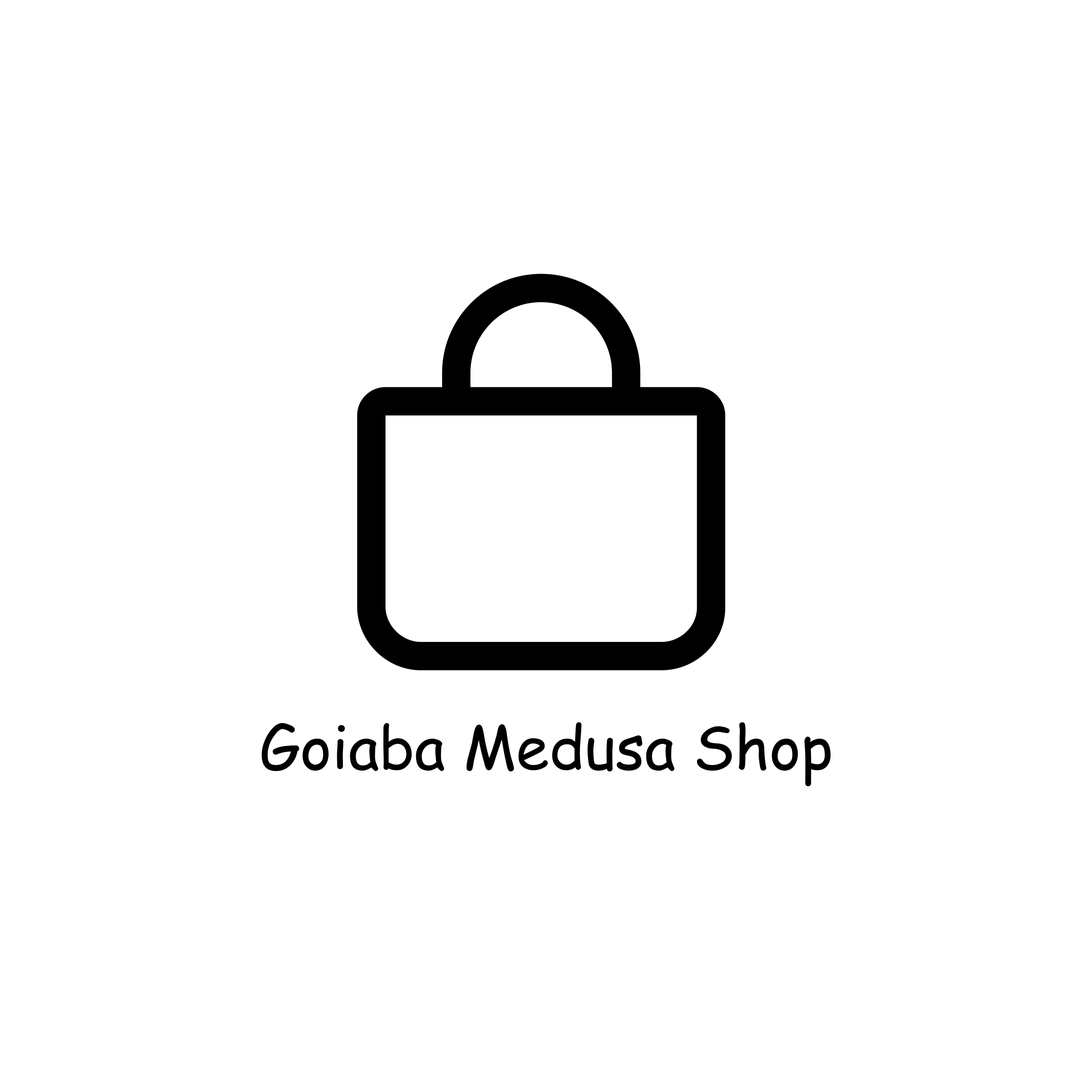
<style>
.page{position:relative;width:1092px;height:1092px;background:#ffffff}
.page>*{position:absolute;margin:0}
.t1{font:60px "ComicSansMS";color:#000000}
</style>
<div class="page">
<p class="t1" style="left:261px;top:722px;width:570px;height:64px">Goiaba Medusa Shop</p>
</div>
